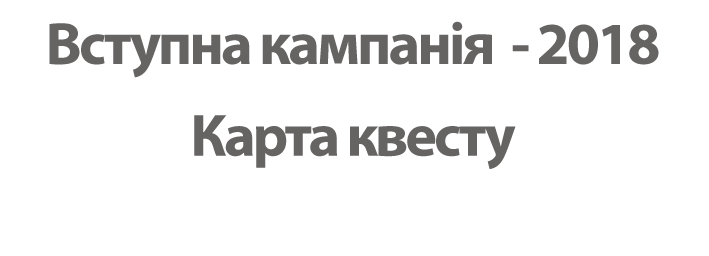
<style>
.page{position:relative;width:709px;height:256px;background:#ffffff}
.page>*{position:absolute;margin:0}
.t1{font:60px/15.3px "MyriadPro-Bold";letter-spacing:-0.05em;color:#666363}
</style>
<div class="page">
<p class="t1" style="left:49px;top:21px;width:610px;height:148px;text-align:center">Вступна кампанія  - 2018<br><br><br><br><br><br>Карта квесту</p>
</div>
